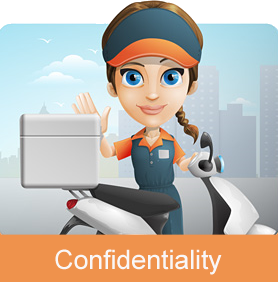
<style>
.page{position:relative;width:278px;height:282px}
.page>*{position:absolute;margin:0}
.t1{font:26.7px "ArialMT";color:#f9f7f8}
</style>
<div class="page">
<p class="t1" style="left:55px;top:249px;width:167px;height:26px">Confidentiality</p>
</div>
